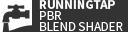
<style>
.page{position:relative;width:128px;height:32px;background:#333333}
.page>*{position:absolute;margin:0}
.t1{font:13px/11px "SourceSansPro-Regular";color:#ffffff}
.t2{font:13px/11px "SourceSansPro-Bold";color:#ffffff}
</style>
<div class="page">
<p class="t1" style="left:39px;top:0px;width:84px;height:31px"><span class="t2">RUNNINGTAP<br></span>PBR<br>BLEND SHADER</p>
</div>
